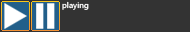
<style>
.page{position:relative;width:190px;height:32px;background:#333333}
.page>*{position:absolute;margin:0}
.t1{font:8px "SegoeUI-SemiBold"}
</style>
<div class="page">
<p class="t1" style="left:62px;top:1px;width:27px;height:9px">playing</p>
</div>
